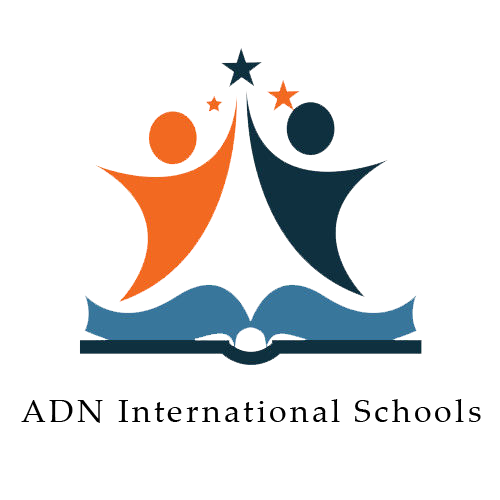
<style>
.page{position:relative;width:500px;height:500px;background:#ffffff}
.page>*{position:absolute;margin:0}
.t1{font:32px "PalatinoLinotype-Roman";letter-spacing:0.1em;color:#000000}
</style>
<div class="page">
<p class="t1" style="left:21px;top:399px;width:460px;height:24px">ADN International Schools</p>
</div>
